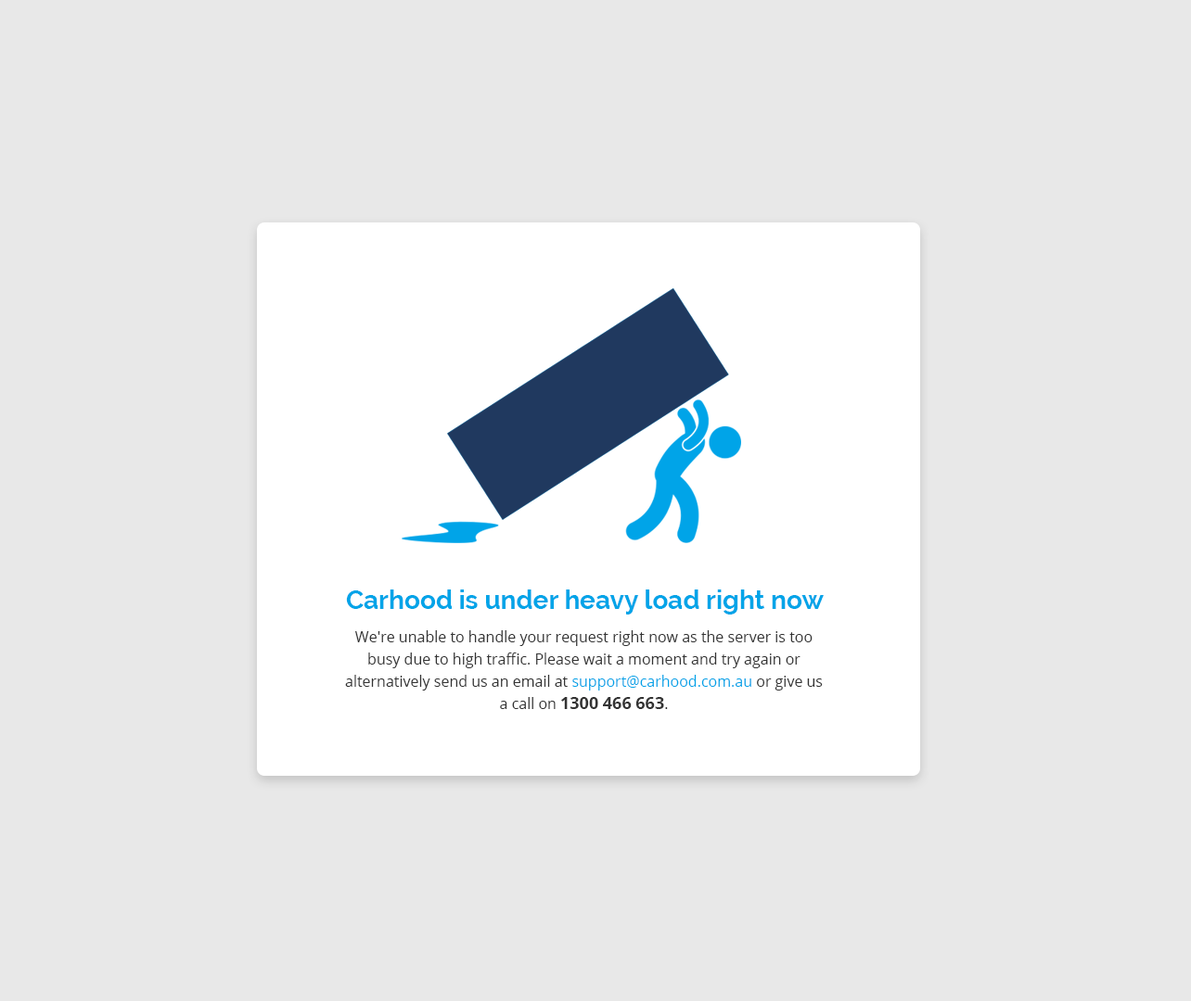
<style>
.page{position:relative;width:1191px;height:1001px;background:#e8e8e8}
.page>*{position:absolute;margin:0}
.t1{font:26px "Raleway-Bold";color:#00a4e8}
.t2{font:14.8px/22.3px "OpenSans";color:#333333}
.t3{font:14.8px/22.3px "OpenSans";color:#00a4e8}
.t4{font:16.7px/22.3px "OpenSans-Bold";color:#333333}
</style>
<div class="page">
<p class="t1" style="left:346px;top:590px;width:477px;height:25px">Carhood is under heavy load right now</p>
<p class="t2" style="left:345px;top:631px;width:478px;height:78px;text-align:center">We're unable to handle your request right now as the server is too busy due to high traffic. Please wait a moment and try again or alternatively send us an email at <span class="t3">support@carhood.com.au</span> or give us a call on <span class="t4">1300 466 663</span>.</p>
</div>
